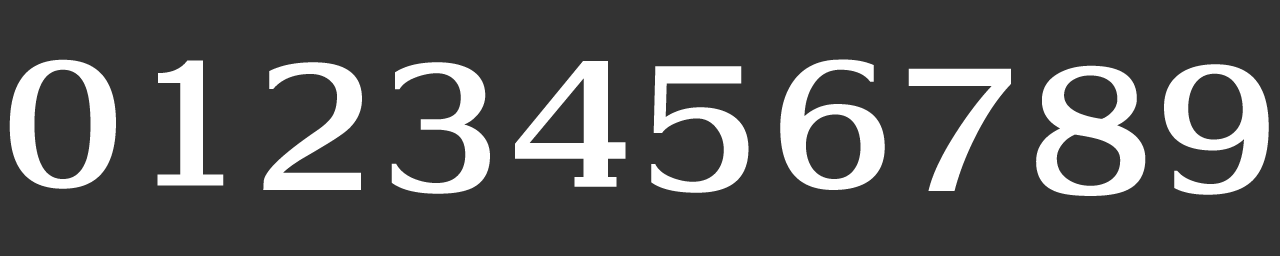
<style>
.page{position:relative;width:1280px;height:256px;background:#333333}
.page>*{position:absolute;margin:0}
.t1{font:165px "SicPrintempsPetitE";color:#ffffff}
</style>
<div class="page">
<p class="t1" style="left:9px;top:59px;width:107px;height:130px">0</p>
<p class="t1" style="left:157px;top:60px;width:67px;height:126px">1</p>
<p class="t1" style="left:263px;top:62px;width:99px;height:128px">2</p>
<p class="t1" style="left:391px;top:62px;width:99px;height:132px">3</p>
<p class="t1" style="left:515px;top:61px;width:111px;height:126px">4</p>
<p class="t1" style="left:780px;top:59px;width:105px;height:131px">6</p>
<p class="t1" style="left:1036px;top:65px;width:110px;height:131px">8</p>
<p class="t1" style="left:1164px;top:64px;width:105px;height:131px">9</p>
<p class="t1" style="left:651px;top:66px;width:98px;height:127px">5</p>
<p class="t1" style="left:908px;top:68px;width:103px;height:123px">7</p>
</div>
